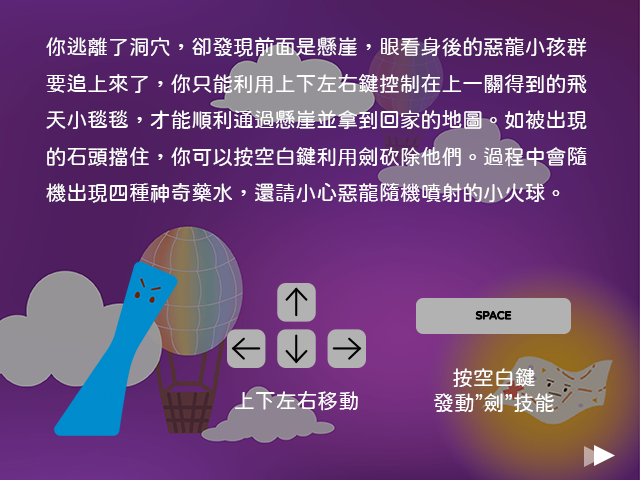
<style>
.page{position:relative;width:640px;height:480px}
.page>*{position:absolute;margin:0}
.t1{font:20.8px "jf-openhuninn-1.1";color:#ffffff}
.t2{font:20.8px/25px "jf-openhuninn-1.1";color:#ffffff}
</style>
<div class="page">
<p class="t1" style="left:46px;top:37px;width:541px;height:166px">你逃離了洞穴，卻發現前面是懸崖，眼看身後的惡龍小孩群要追上來了，你只能利用上下左右鍵控制在上一關得到的飛天小毯毯，才能順利通過懸崖並拿到回家的地圖。如被出現的石頭擋住，你可以按空白鍵利用劍砍除他們。過程中會隨機出現四種神奇藥水，還請小心惡龍隨機噴射的小火球。</p>
<p class="t2" style="left:434px;top:368px;width:120px;height:44px;text-align:center">按空白鍵<br>發動”劍”技能</p>
<p class="t1" style="left:235px;top:391px;width:123px;height:20px">上下左右移動</p>
</div>
